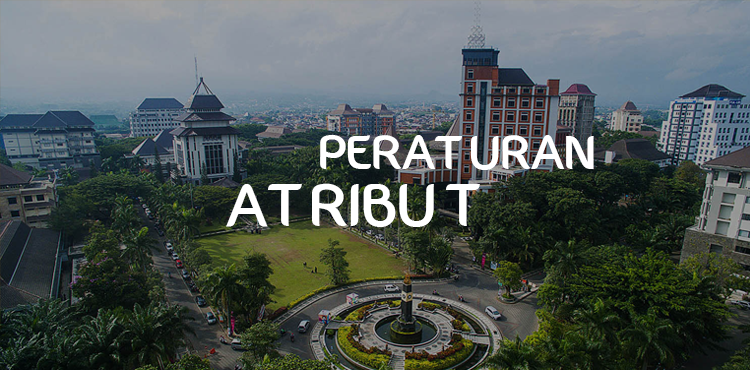
<style>
.page{position:relative;width:750px;height:370px}
.page>*{position:absolute;margin:0}
.t1{font:48px "Fontastique-Fontastique";color:#ffffff}
.t2{font:60px "Fontastique-Fontastique";color:#ffffff}
</style>
<div class="page">
<p class="t1" style="left:320px;top:135px;width:274px;height:35px">PERATURAN</p>
<p class="t2" style="left:226px;top:183px;width:254px;height:44px">ATRIBUT</p>
</div>
